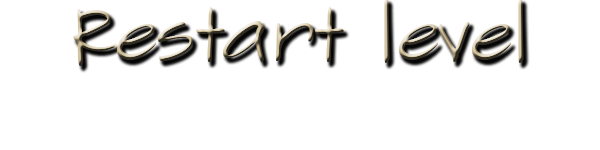
<style>
.page{position:relative;width:600px;height:150px;background:#ffffff}
.page>*{position:absolute;margin:0}
.t1{font:75px "SketchFlowPrint"}
</style>
<div class="page">
<p class="t1" style="left:73px;top:0px;width:451px;height:66px">Restart level</p>
</div>
